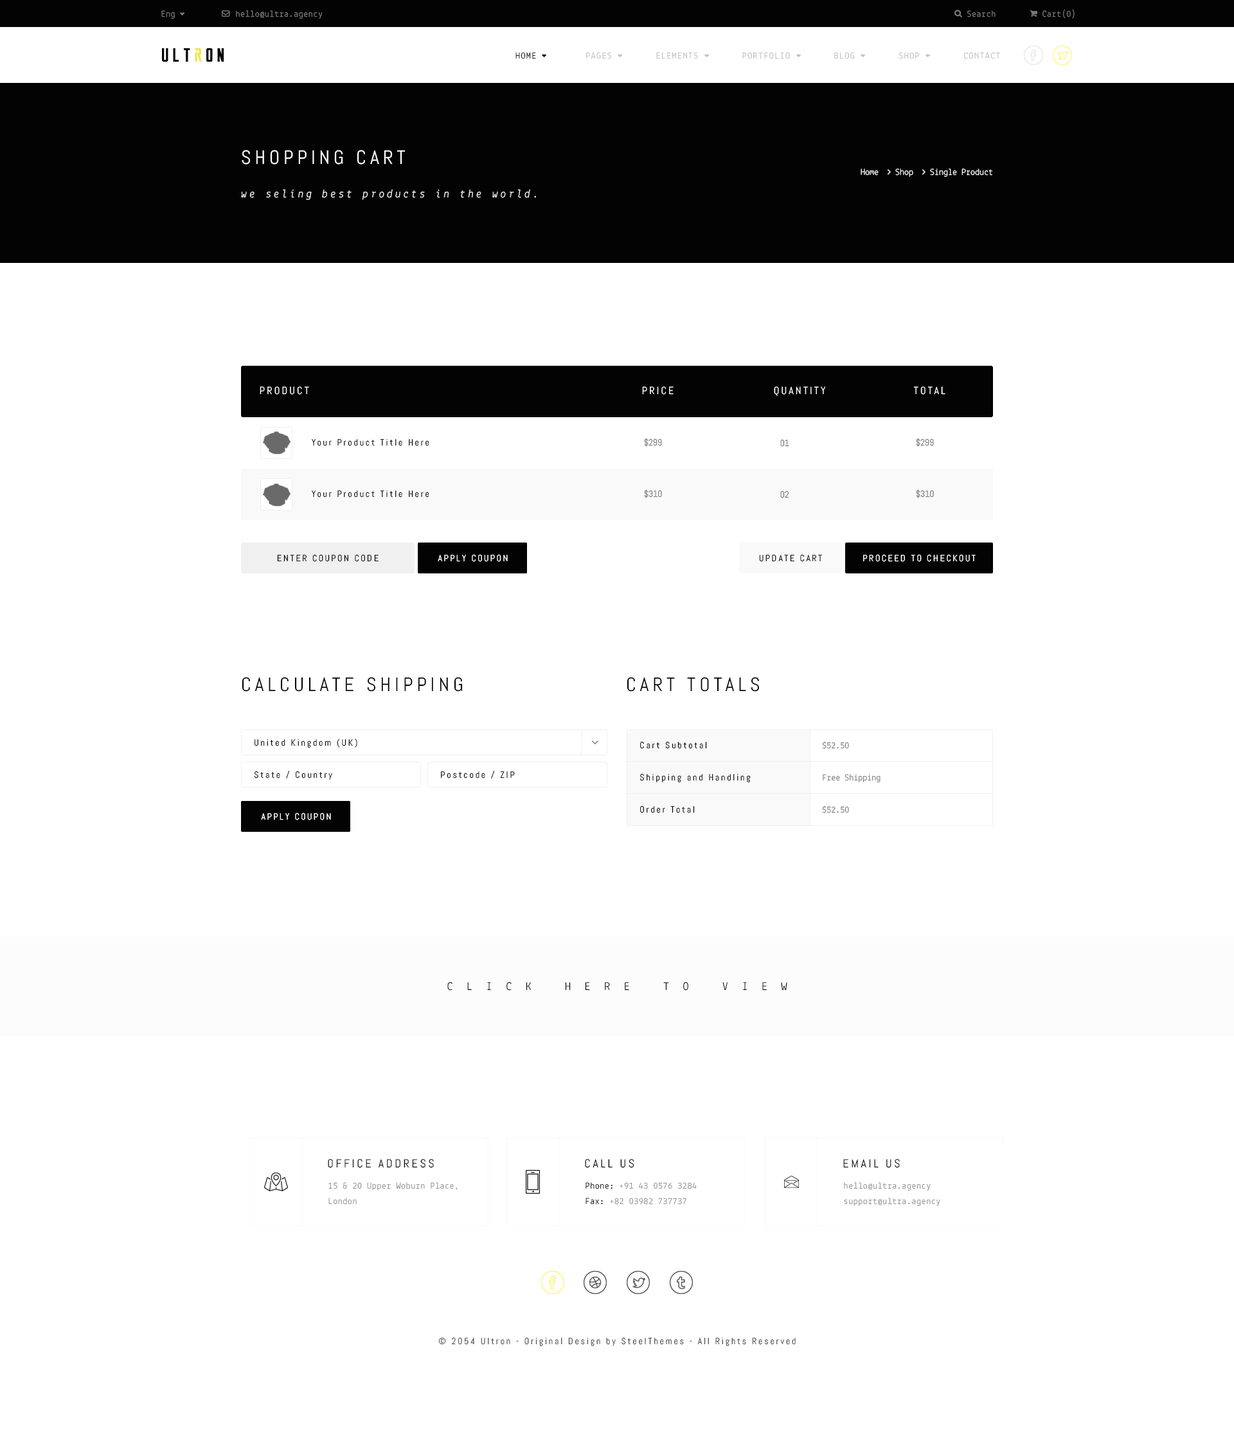
<style>
.page{position:relative;width:1234px;height:1447px;background:#ffffff}
.page>*{position:absolute;margin:0}
.t1{font:9px "Lekton-Regular";letter-spacing:0.04em;color:#787878}
.t2{font:9px "Lekton-Regular";letter-spacing:0.1em;color:#bfbfbf;text-transform:uppercase}
.t3{font:9px "Lekton-Regular";letter-spacing:0.1em;color:#030303;text-transform:uppercase}
.t4{font:19.3px "Abel-Regular";letter-spacing:0.2em;color:#ffffff;text-transform:uppercase}
.t5{font:11.6px "Lekton-Italic";letter-spacing:0.2em;color:#ffffff}
.t6{font:10.3px "Abel-Regular";letter-spacing:0.2em;color:#ffffff}
.t7{font:9px "Abel-Regular";color:#787878}
.t8{font:9px "Abel-Regular";letter-spacing:0.2em;color:#030303}
.t9{font:9px "Abel-Regular";letter-spacing:0.2em;color:#ffffff}
.t10{font:19.3px "Abel-Regular";letter-spacing:0.2em;color:#030303;text-transform:uppercase}
.t11{font:9px/32.1px "Abel-Regular";letter-spacing:0.2em;color:#030303}
.t12{font:9px/32.1px "Lekton-Regular";color:#787878}
.t13{font:11.6px "Lekton-Regular";letter-spacing:1.2em;color:#030303;text-transform:uppercase}
.t14{font:11.6px "Abel-Regular";letter-spacing:0.2em;color:#030303;text-transform:uppercase}
.t15{font:9px/15.4px "Lekton-Regular";letter-spacing:0.04em;color:#969595}
.t16{font:9px/15.4px "Lekton-Regular";letter-spacing:0.04em;color:#030303}
.t17{font:9px "Abel-Regular";letter-spacing:0.2em;color:#4f4f4f}
</style>
<div class="page">
<p class="t1" style="left:161px;top:10px;width:14px;height:9px">Eng</p>
<p class="t1" style="left:236px;top:10px;width:87px;height:9px">hello@ultra.agency</p>
<p class="t1" style="left:968px;top:10px;width:28px;height:7px">Search</p>
<p class="t1" style="left:1043px;top:9px;width:32px;height:10px">Cart(0)</p>
<p class="t2" style="left:516px;top:52px;width:484px;height:7px"><span class="t3">Home         </span>Pages        Elements        Portfolio        Blog        Shop        Contact</p>
<p class="t4" style="left:242px;top:150px;width:164px;height:15px">shopping cart</p>
<p class="t5" style="left:241px;top:189px;width:295px;height:11px">we seling best products in the world.</p>
<p class="t6" style="left:260px;top:386px;width:49px;height:9px">PRODUCT</p>
<p class="t6" style="left:642px;top:386px;width:32px;height:9px">PRICE</p>
<p class="t6" style="left:774px;top:386px;width:51px;height:10px">QUANTITY</p>
<p class="t6" style="left:914px;top:386px;width:32px;height:9px">TOTAL</p>
<p class="t7" style="left:644px;top:438px;width:18px;height:9px">$299</p>
<p class="t7" style="left:916px;top:438px;width:18px;height:9px">$299</p>
<p class="t8" style="left:312px;top:439px;width:117px;height:7px">Your Product Title Here</p>
<p class="t7" style="left:780px;top:439px;width:9px;height:8px">01</p>
<p class="t8" style="left:312px;top:491px;width:117px;height:7px">Your Product Title Here</p>
<p class="t7" style="left:644px;top:489px;width:18px;height:9px">$310</p>
<p class="t7" style="left:780px;top:491px;width:9px;height:7px">02</p>
<p class="t7" style="left:916px;top:489px;width:18px;height:9px">$310</p>
<p class="t8" style="left:277px;top:554px;width:102px;height:8px">ENTER COUPON CODE</p>
<p class="t9" style="left:438px;top:554px;width:70px;height:8px">APPLY COUPON</p>
<p class="t8" style="left:759px;top:554px;width:63px;height:8px">UPDATE CART</p>
<p class="t9" style="left:863px;top:554px;width:113px;height:8px">PROCEED TO CHECKOUT</p>
<p class="t10" style="left:242px;top:677px;width:221px;height:15px">Calculate Shipping</p>
<p class="t10" style="left:627px;top:677px;width:133px;height:15px">Cart Totals</p>
<p class="t8" style="left:255px;top:739px;width:102px;height:9px">United Kingdom (UK)</p>
<p class="t11" style="left:640px;top:741px;width:111px;height:72px">Cart Subtotal <br>Shipping and Handling<br>Order Total</p>
<p class="t12" style="left:822px;top:741px;width:59px;height:73px">$52.50<br>Free Shipping<br>$52.50</p>
<p class="t8" style="left:254px;top:771px;width:78px;height:9px">State / Country</p>
<p class="t8" style="left:441px;top:771px;width:74px;height:8px">Postcode / ZIP</p>
<p class="t9" style="left:261px;top:813px;width:70px;height:7px">APPLY COUPON</p>
<p class="t13" style="left:447px;top:982px;width:341px;height:9px">Click here to view</p>
<p class="t14" style="left:328px;top:1159px;width:106px;height:9px">Office Address</p>
<p class="t14" style="left:585px;top:1159px;width:49px;height:9px">Call us</p>
<p class="t14" style="left:843px;top:1159px;width:57px;height:9px">Email us</p>
<p class="t15" style="left:328px;top:1182px;width:130px;height:23px">15 &amp; 20 Upper Woburn Place,<br>London</p>
<p class="t15" style="left:586px;top:1182px;width:111px;height:23px"><span class="t16">Phone:</span> +91 43 0576 3284<br><span class="t16">Fax:</span> +82 03982 737737</p>
<p class="t15" style="left:844px;top:1182px;width:97px;height:24px">hello@ultra.agency<br>support@ultra.agency</p>
<p class="t17" style="left:438px;top:1337px;width:358px;height:9px">© 2054 Ultron - Original Design by SteelThemes - All Rights Reserved</p>
</div>
